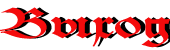
<style>
.page{position:relative;width:170px;height:50px;background:#ffffff}
.page>*{position:absolute;margin:0}
.t1{font:42.5px "Schwabacher-Regular";color:#f40b0c;scale:1.37 1}
</style>
<div class="page">
<p class="t1" style="left:0px;top:7px;width:171px;height:41px">Выход</p>
</div>
